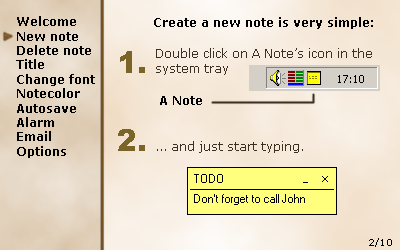
<style>
.page{position:relative;width:400px;height:250px}
.page>*{position:absolute;margin:0}
.t1{font:12px "Verdana-Bold";color:#010101}
.t2{font:12px "Verdana-Bold";color:#000000}
.t3{font:30px "Arial-Black";color:#7b6428}
.t4{font:12px "Verdana";color:#3b3022}
.t5{font:9px "Verdana";color:#000000}
</style>
<div class="page">
<p class="t1" style="left:16px;top:16px;width:79px;height:142px">Welcome<br>New note<br>Delete note<br>Title<br>Change font<br>Notecolor<br>Autosave<br>Alarm<br>Email<br>Options</p>
<p class="t2" style="left:154px;top:17px;width:219px;height:12px">Create a new note is very simple:</p>
<p class="t3" style="left:120px;top:51px;width:25px;height:22px">1.</p>
<p class="t4" style="left:156px;top:48px;width:216px;height:27px">Double click on A Note’s icon in the system tray</p>
<p class="t2" style="left:160px;top:96px;width:42px;height:9px">A Note</p>
<p class="t3" style="left:118px;top:129px;width:27px;height:22px">2.</p>
<p class="t4" style="left:157px;top:141px;width:146px;height:12px">... and just start typing.</p>
<p class="t5" style="left:369px;top:238px;width:23px;height:9px">2/10</p>
</div>
